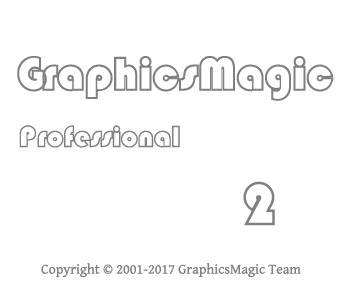
<style>
.page{position:relative;width:350px;height:300px;background:#ffffff}
.page>*{position:absolute;margin:0}
.t1{font:48px "STCaiyun";color:#808080}
.t2{font:30px "STCaiyun";color:#808080}
.t3{font:60px "STCaiyun";color:#808080}
.t4{font:14px "GentiumBookBasic";color:#808080}
</style>
<div class="page">
<p class="t1" style="left:17px;top:56px;width:317px;height:45px">GraphicsMagic</p>
<p class="t2" style="left:19px;top:125px;width:161px;height:23px">Professional</p>
<p class="t3" style="left:243px;top:181px;width:32px;height:45px">2</p>
<p class="t4" style="left:41px;top:263px;width:260px;height:15px">Copyright © 2001-2017 GraphicsMagic Team</p>
</div>
